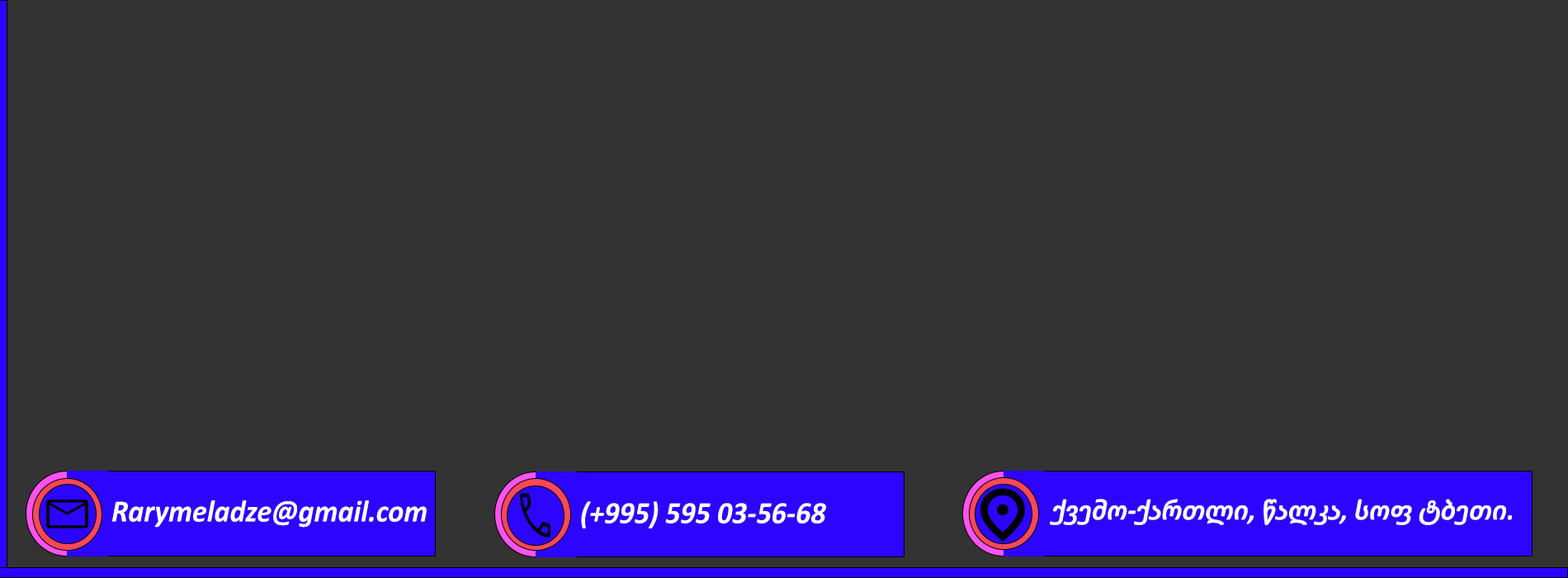
<style>
.page{position:relative;width:1568px;height:578px;background:#333333}
.page>*{position:absolute;margin:0}
.t1{font:30.9px "Calibri-BoldItalic";color:#fefdfd;scale:0.96 1}
.t2{font:29.7px "Calibri-BoldItalic";color:#fefdfd;scale:0.96 1}
</style>
<div class="page">
<p class="t1" style="left:112px;top:500px;width:315px;height:27px">Rarymeladze@gmail.com</p>
<p class="t1" style="left:581px;top:501px;width:245px;height:27px">(+995) 595 03-56-68</p>
<p class="t2" style="left:1050px;top:498px;width:463px;height:27px">ქვემო-ქართლი, წალკა, სოფ ტბეთი.</p>
</div>
